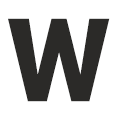
<style>
.page{position:relative;width:120px;height:120px;background:#ffffff}
.page>*{position:absolute;margin:0}
.t1{font:114px "Industry-Black";color:#2b2a28;text-transform:uppercase}
</style>
<div class="page">
<p class="t1" style="left:8px;top:18px;width:102px;height:84px">W</p>
</div>
